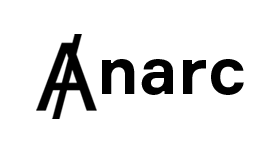
<style>
.page{position:relative;width:279px;height:158px;background:#ffffff}
.page>*{position:absolute;margin:0}
.t1{font:66.2px "Formular-Bold";color:#000000}
</style>
<div class="page">
<p class="t1" style="left:102px;top:59px;width:142px;height:36px">narc</p>
</div>
